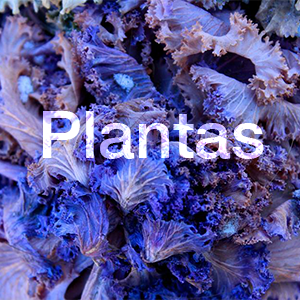
<style>
.page{position:relative;width:300px;height:300px}
.page>*{position:absolute;margin:0}
.t1{font:66px "HelveticaNeue-Medium"}
</style>
<div class="page">
<p class="t1" style="left:43px;top:111px;width:221px;height:48px">Plantas</p>
</div>
